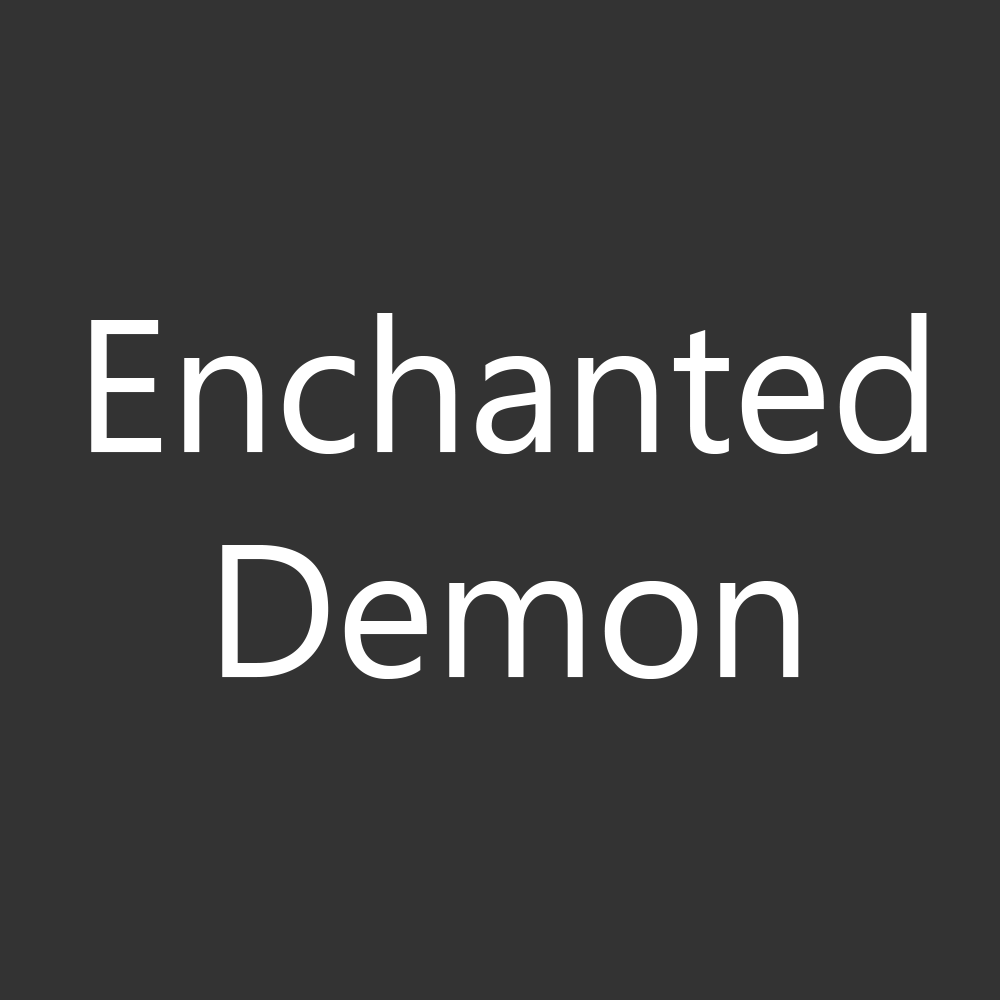
<style>
.page{position:relative;width:1000px;height:1000px;background:#333333}
.page>*{position:absolute;margin:0}
.t1{font:187.5px "SegoeUI";color:#ffffff}
</style>
<div class="page">
<p class="t1" style="left:91px;top:313px;width:836px;height:366px;text-align:center">Enchanted<br>Demon</p>
</div>
